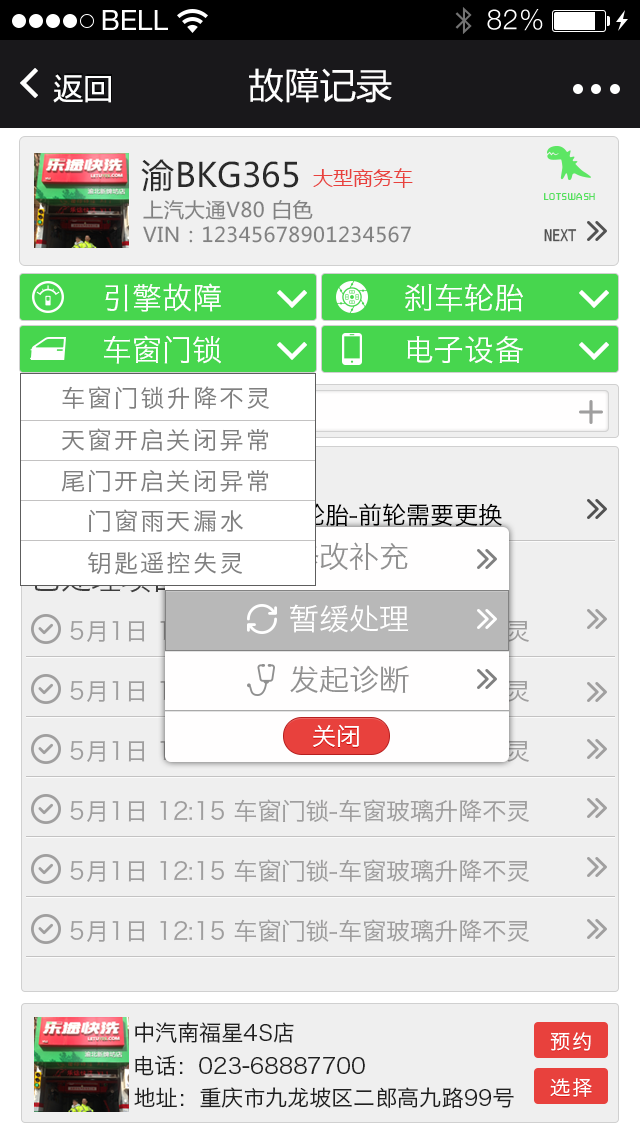
<style>
.page{position:relative;width:640px;height:1136px;background:#efefef}
.page>*{position:absolute;margin:0}
.t1{font:28px "HelveticaNeue";color:#ffffff;text-transform:uppercase}
.t2{font:28px "HelveticaNeue-Light";letter-spacing:0.025em;color:#ffffff}
.t3{font:30px "MingLan_Mono";letter-spacing:0.005em;color:#ffffff}
.t4{font:36px "MingLan_Mono";color:#fefefe}
.t5{font:33.2px "MicrosoftYaHei";letter-spacing:0.005em;color:#2a2a2a}
.t6{font:20px "MicrosoftYaHei";color:#e8413d}
.t7{font:10px "MFShangHei_Noncommercial-Regular";letter-spacing:0.1em;color:#54e05c}
.t8{font:20.3px/25px "MicrosoftYaHei";letter-spacing:0.025em;color:#818181}
.t9{font:16px "MingLan_Mono";color:#525252;text-transform:uppercase}
.t10{font:30px "HiraginoSansGB-W3";color:#ffffff}
.t11{font:24px "HiraginoSansGB-W3";letter-spacing:0.1em;color:#808080}
.t12{font:24px "HiraginoSansGB-W3"}
.t13{font:30px "HiraginoSansGB-W3";color:#909090}
.t14{font:24px "HiraginoSansGB-W3";color:#ffffff}
.t15{font:24px "HiraginoSansGB-W3";color:#9f9e9e}
.t16{font:22px "HiraginoSansGB-W3";color:#1f1f1f}
.t17{font:20px "HiraginoSansGB-W3";letter-spacing:0.1em;color:#ffffff}
</style>
<div class="page">
<p class="t1" style="left:102px;top:10px;width:66px;height:20px">Bell</p>
<p class="t2" style="left:487px;top:9px;width:56px;height:22px">82%</p>
<p class="t3" style="left:53px;top:74px;width:58px;height:29px">返回</p>
<p class="t4" style="left:249px;top:68px;width:143px;height:35px">故障记录</p>
<p class="t5" style="left:141px;top:159px;width:158px;height:33px">渝BKG365</p>
<p class="t6" style="left:313px;top:168px;width:100px;height:20px">大型商务车</p>
<p class="t7" style="left:544px;top:193px;width:51px;height:7px">LOTSWASH</p>
<p class="t8" style="left:143px;top:200px;width:268px;height:43px">上汽大通V80 白色<br>VIN：12345678901234567</p>
<p class="t9" style="left:544px;top:229px;width:33px;height:13px">NExt</p>
<p class="t10" style="left:105px;top:283px;width:116px;height:29px">引擎故障</p>
<p class="t10" style="left:405px;top:283px;width:118px;height:29px">刹车轮胎</p>
<p class="t10" style="left:104px;top:335px;width:117px;height:29px">车窗门锁</p>
<p class="t10" style="left:407px;top:336px;width:116px;height:28px">电子设备</p>
<p class="t11" style="left:62px;top:386px;width:207px;height:23px">车窗门锁升降不灵</p>
<p class="t11" style="left:62px;top:428px;width:207px;height:23px">天窗开启关闭异常</p>
<p class="t11" style="left:61px;top:469px;width:208px;height:23px">尾门开启关闭异常</p>
<p class="t12" style="left:73px;top:503px;width:429px;height:24px">4月23日 13:00 刹车轮胎-前轮需要更换</p>
<p class="t11" style="left:89px;top:509px;width:154px;height:23px">门窗雨天漏水</p>
<p class="t13" style="left:289px;top:542px;width:119px;height:29px">修改补充</p>
<p class="t11" style="left:88px;top:551px;width:154px;height:24px">钥匙遥控失灵</p>
<p class="t10" style="left:290px;top:604px;width:119px;height:29px">暂缓处理</p>
<p class="t13" style="left:290px;top:665px;width:119px;height:28px">发起诊断</p>
<p class="t14" style="left:313px;top:724px;width:46px;height:23px">关闭</p>
<p class="t15" style="left:70px;top:799px;width:459px;height:23px">5月1日 12:15 车窗门锁-车窗玻璃升降不灵</p>
<p class="t15" style="left:70px;top:859px;width:459px;height:23px">5月1日 12:15 车窗门锁-车窗玻璃升降不灵</p>
<p class="t15" style="left:70px;top:919px;width:459px;height:23px">5月1日 12:15 车窗门锁-车窗玻璃升降不灵</p>
<p class="t16" style="left:135px;top:1022px;width:159px;height:21px">中汽南福星4S店</p>
<p class="t17" style="left:550px;top:1032px;width:41px;height:19px">预约</p>
<p class="t16" style="left:135px;top:1055px;width:230px;height:21px">电话：023-68887700</p>
<p class="t17" style="left:550px;top:1078px;width:42px;height:19px">选择</p>
<p class="t16" style="left:134px;top:1087px;width:380px;height:22px">地址：重庆市九龙坡区二郎高九路99号</p>
</div>
